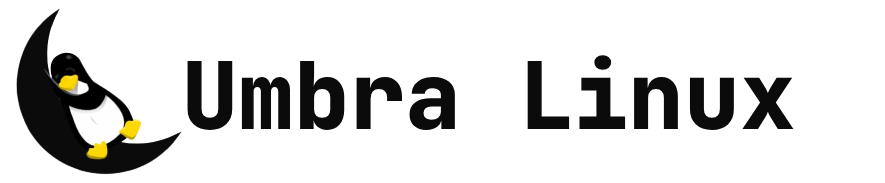
<style>
.page{position:relative;width:885px;height:183px;background:#ffffff}
.page>*{position:absolute;margin:0}
.t1{font:93px "JetBrainsMonoRoman-ExtraBold";color:#0b0b0b}
</style>
<div class="page">
<p class="t1" style="left:187px;top:55px;width:607px;height:75px">Umbra Linux</p>
</div>
